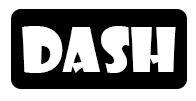
<style>
.page{position:relative;width:196px;height:101px;background:#ffffff}
.page>*{position:absolute;margin:0}
.t1{font:60px "ShowcardGothic-Reg";color:#ffffff}
</style>
<div class="page">
<p class="t1" style="left:22px;top:26px;width:154px;height:47px">Dash</p>
</div>
